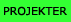
<style>
.page{position:relative;width:71px;height:22px;background:#33ff33}
.page>*{position:absolute;margin:0}
.t1{font:11px "Verdana";color:#000000}
</style>
<div class="page">
<p class="t1" style="left:4px;top:6px;width:63px;height:10px">PROJEKTER</p>
</div>
